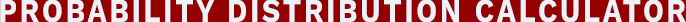
<style>
.page{position:relative;width:686px;height:22px;background:#940000}
.page>*{position:absolute;margin:0}
.t1{font:33.6px "WorkSansRoman-Bold";letter-spacing:0.1em;color:#eff1f9;scale:0.84 1}
</style>
<div class="page">
<p class="t1" style="left:0px;top:0px;width:686px;height:23px">PROBABILITY DISTRIBUTION CALCULATOR</p>
</div>
